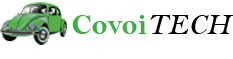
<style>
.page{position:relative;width:233px;height:59px;background:#ffffff}
.page>*{position:absolute;margin:0}
.t1{font:30px "BellMTBold";color:#3bb143}
.t2{font:30px "BellMTItalic";color:#010000}
</style>
<div class="page">
<p class="t1" style="left:72px;top:15px;width:161px;height:19px">Covoi<span class="t2">TECH</span></p>
</div>
